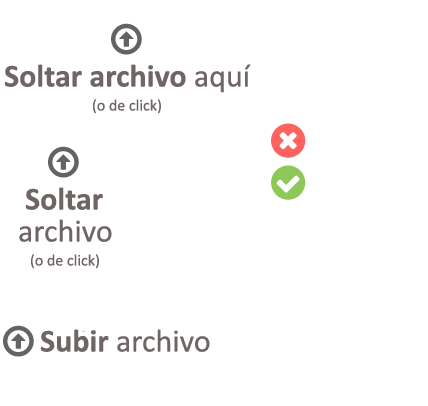
<style>
.page{position:relative;width:428px;height:406px;background:#ffffff}
.page>*{position:absolute;margin:0}
.t1{font:32px "Calibri-Bold";color:#6f6565}
.t2{font:32px "Calibri";color:#6f6565}
.t3{font:16px "Calibri";color:#6f6565}
</style>
<div class="page">
<p class="t1" style="left:4px;top:64px;width:247px;height:29px">Soltar archivo<span class="t2"> aquí</span></p>
<p class="t3" style="left:93px;top:99px;width:68px;height:15px">(o de click)</p>
<p class="t1" style="left:25px;top:187px;width:78px;height:23px">Soltar</p>
<p class="t2" style="left:19px;top:219px;width:93px;height:23px">archivo</p>
<p class="t3" style="left:31px;top:254px;width:68px;height:15px">(o de click)</p>
<p class="t2" style="left:40px;top:329px;width:170px;height:23px"><span class="t1">Subir</span> archivo</p>
</div>
